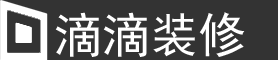
<style>
.page{position:relative;width:278px;height:60px;background:#333333}
.page>*{position:absolute;margin:0}
.t1{font:48px "SimHei";color:#ffffff}
</style>
<div class="page">
<p class="t1" style="left:55px;top:12px;width:190px;height:45px">滴滴装修</p>
</div>
